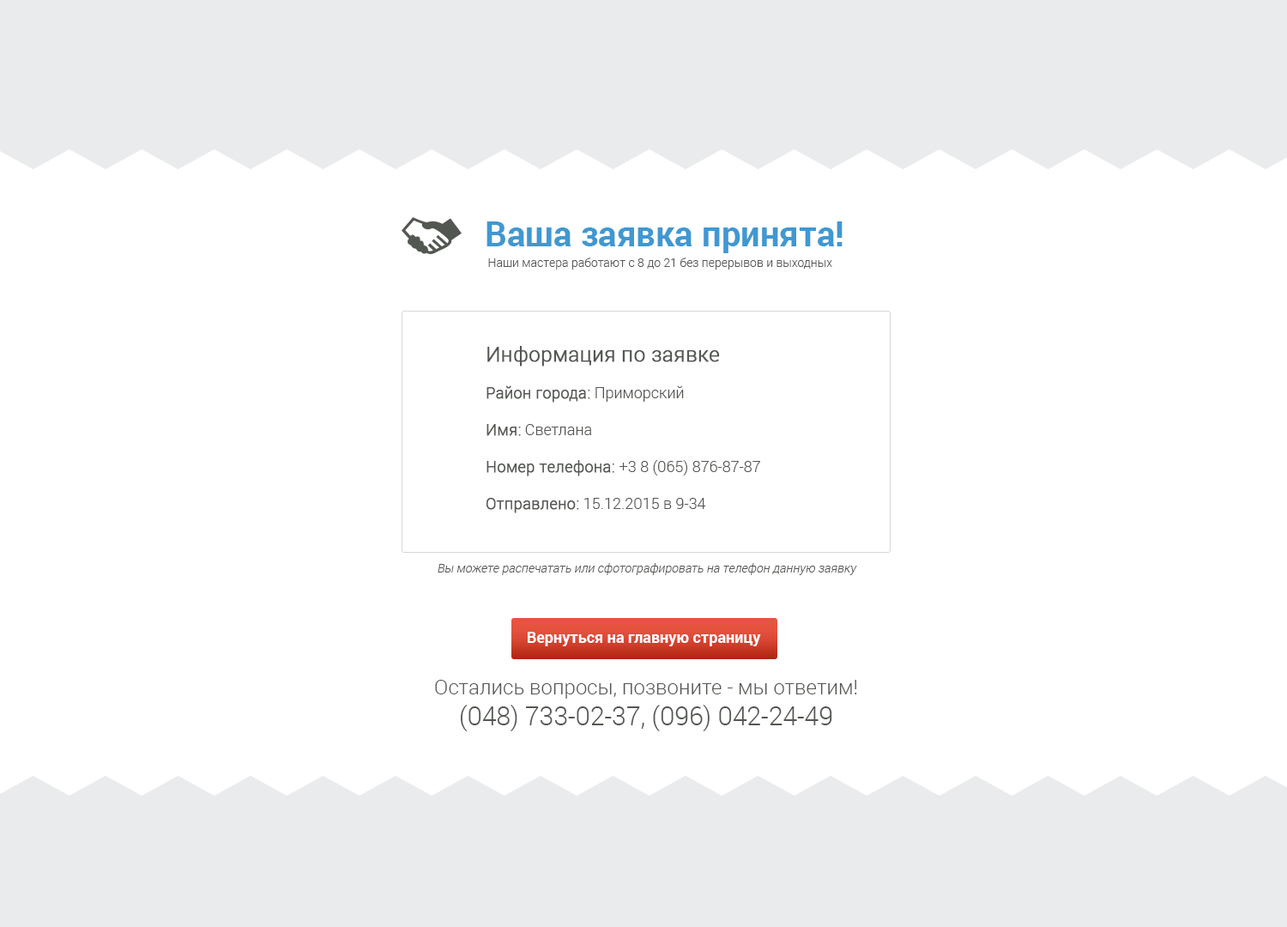
<style>
.page{position:relative;width:1287px;height:927px;background:#ffffff}
.page>*{position:absolute;margin:0}
.t1{font:34.3px "Roboto-Bold";color:#4098d2}
.t2{font:12px "Roboto-Light";color:#535751}
.t3{font:20.6px "Roboto-Light";color:#535751;font-weight:bold}
.t4{font:15.4px "Roboto-Light";color:#535751;font-weight:bold}
.t5{font:15.4px "Roboto-Light";color:#535751}
.t6{font:12px "Roboto-Light";color:#535751;font-style:italic}
.t7{font:15.4px "Roboto-Bold";color:#ffffff}
.t8{font:20.6px "Roboto-Light";color:#535751}
.t9{font:25.7px "Roboto-Light";color:#535751}
</style>
<div class="page">
<p class="t1" style="left:486px;top:221px;width:357px;height:32px">Ваша заявка принята!</p>
<p class="t2" style="left:488px;top:257px;width:344px;height:12px">Наши мастера работают с 8 до 21 без перерывов и выходных</p>
<p class="t3" style="left:486px;top:346px;width:274px;height:167px">Информация по заявке<br> <br><span class="t4">Район города:</span><span class="t5"> Приморский<br> <br></span><span class="t4">Имя:</span><span class="t5"> Светлана<br> <br></span><span class="t4">Номер телефона: </span><span class="t5">+3 8 (065) 876-87-87<br> <br></span><span class="t4">Отправлено:</span><span class="t5"> 15.12.2015 в 9-34</span></p>
<p class="t6" style="left:438px;top:563px;width:419px;height:12px">Вы можете распечатать или сфотографировать на телефон данную заявку</p>
<p class="t7" style="left:528px;top:631px;width:233px;height:15px">Вернуться на главную страницу</p>
<p class="t8" style="left:435px;top:679px;width:422px;height:52px;text-align:center">Остались вопросы, позвоните - мы ответим!<br><span class="t9">(048) 733-02-37, (096) 042-24-49</span></p>
</div>
